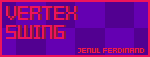
<style>
.page{position:relative;width:150px;height:57px;background:#6400b2}
.page>*{position:absolute;margin:0}
.t1{font:16px "KenPixel-Square";color:#ee145b}
.t2{font:16px "KenPixel-Square";color:#89183d}
.t3{font:8px "KenPixel-Mini-Square";color:#ee145b}
.t4{font:8px "KenPixel-Mini-Square";color:#89183d}
</style>
<div class="page">
<p class="t1" style="left:6px;top:6px;width:70px;height:33px">Vertex<br>Swing</p>
<p class="t2" style="left:8px;top:6px;width:70px;height:33px">Vertex<br>Swing</p>
<p class="t3" style="left:78px;top:48px;width:66px;height:5px">jenul Ferdinand</p>
<p class="t4" style="left:79px;top:48px;width:66px;height:5px">jenul Ferdinand</p>
</div>
